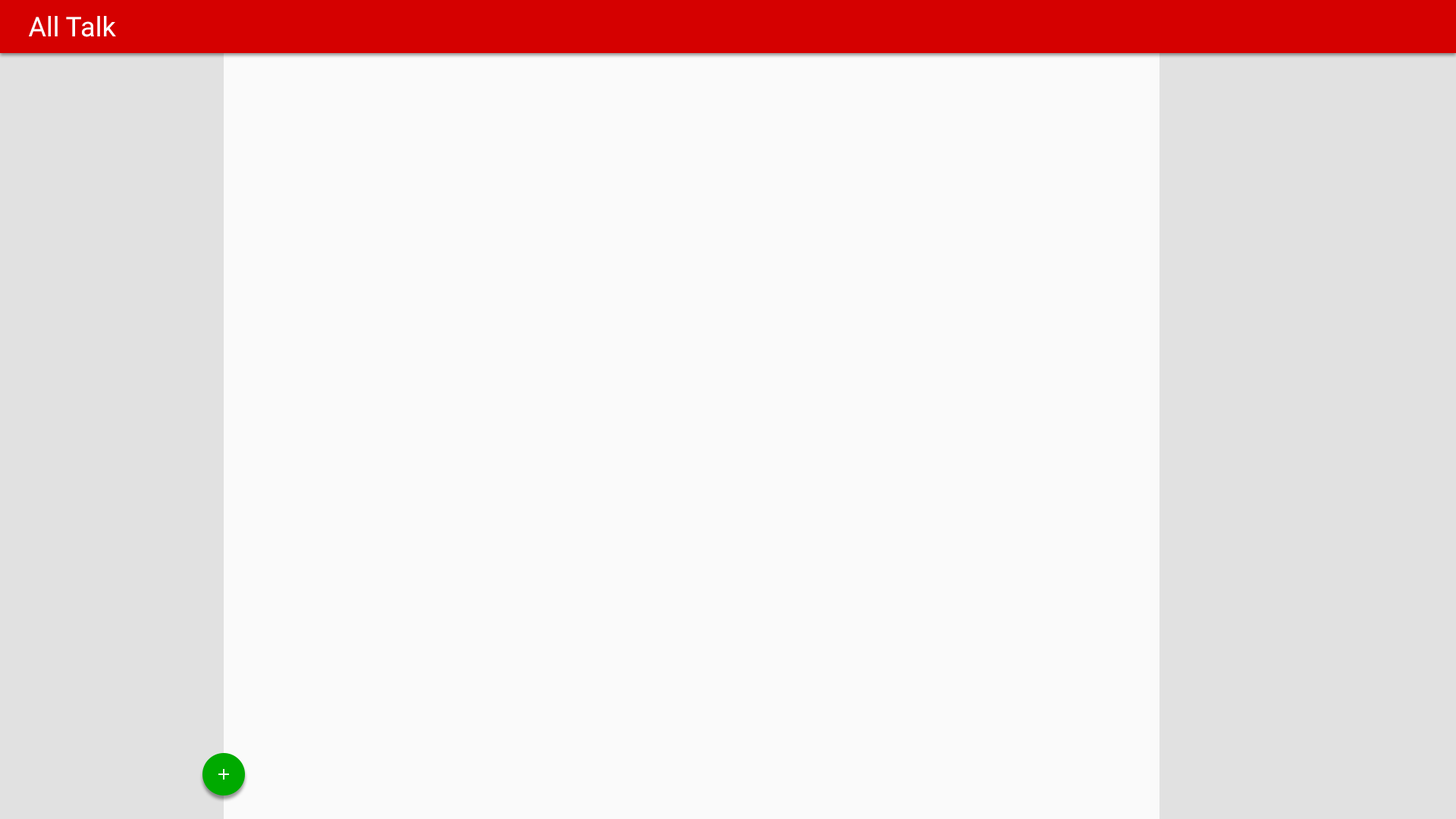
<style>
.page{position:relative;width:1456px;height:819px;background:#fafafa}
.page>*{position:absolute;margin:0}
.t1{font:27.3px "Roboto-Regular";color:#ffffff}
</style>
<div class="page">
<p class="t1" style="left:29px;top:16px;width:87px;height:21px">All Talk</p>
</div>
